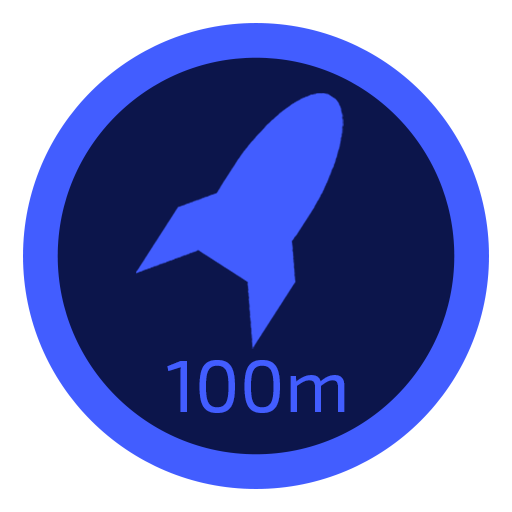
<style>
.page{position:relative;width:512px;height:512px;background:#0c154b}
.page>*{position:absolute;margin:0}
.t1{font:74.2px "Exo2-Regular";color:#425dff}
</style>
<div class="page">
<p class="t1" style="left:167px;top:360px;width:178px;height:53px">100m</p>
</div>
